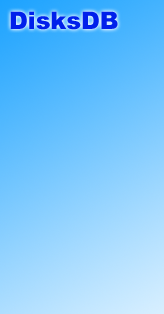
<style>
.page{position:relative;width:164px;height:314px}
.page>*{position:absolute;margin:0}
.t1{font:24px "Arial-Black";color:#0020eb}
</style>
<div class="page">
<p class="t1" style="left:10px;top:11px;width:108px;height:19px">DisksDB</p>
</div>
